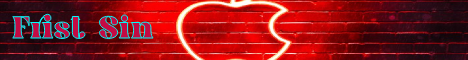
<style>
.page{position:relative;width:468px;height:60px}
.page>*{position:absolute;margin:0}
.t1{font:40px "GoovyModice";color:#c40a43}
</style>
<div class="page">
<p class="t1" style="left:11px;top:13px;width:144px;height:27px">Frist Sin</p>
</div>
